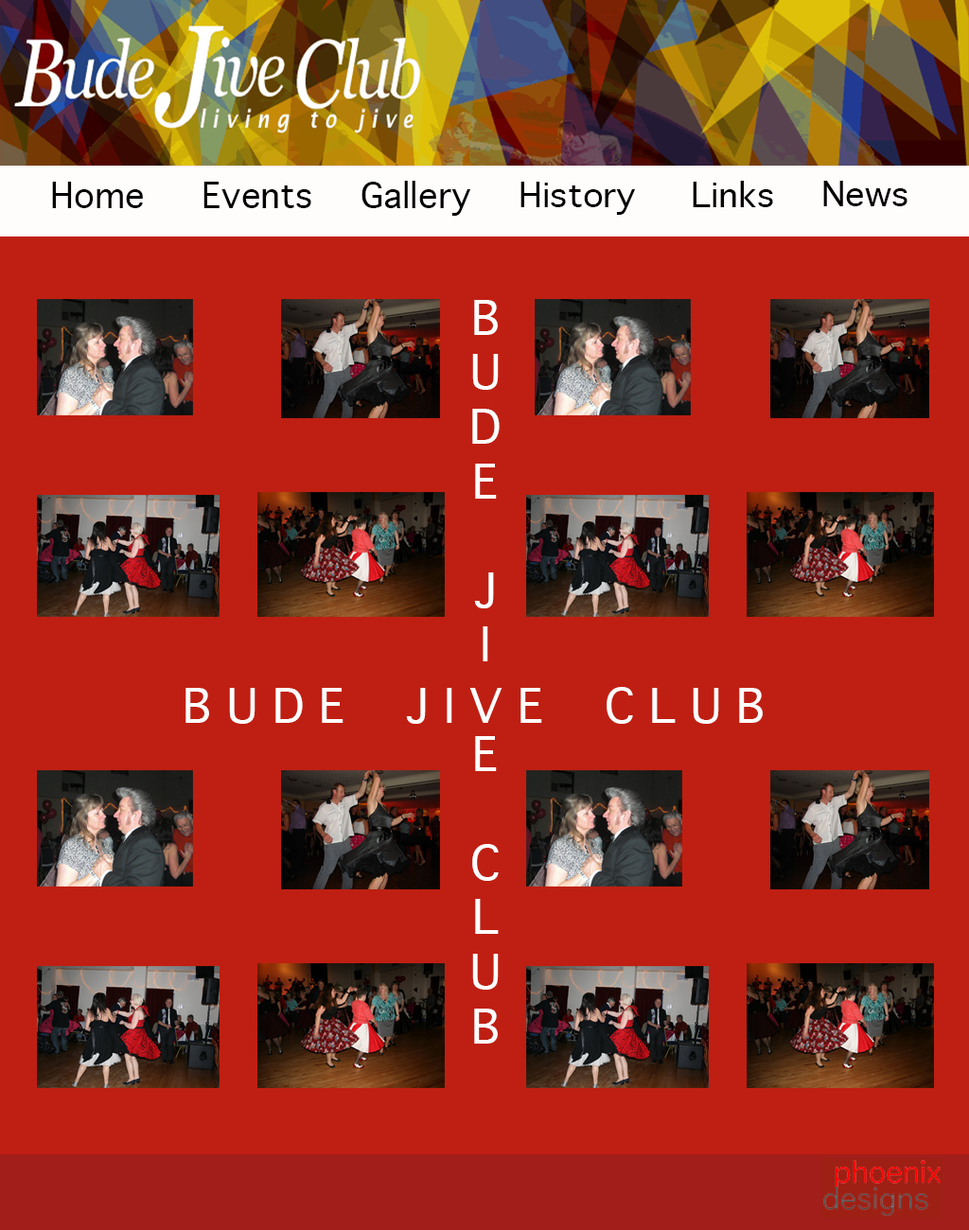
<style>
.page{position:relative;width:969px;height:1230px;background:#bf1f12}
.page>*{position:absolute;margin:0}
.t1{font:33.9px "Geneva";color:#020000}
.t2{font:32.8px "Geneva";color:#020000;scale:1.04 1}
.t3{font:45.4px "Geneva";color:#fdfdfd}
</style>
<div class="page">
<p class="t1" style="left:52px;top:182px;width:91px;height:26px">Home</p>
<p class="t1" style="left:203px;top:182px;width:108px;height:26px">Events</p>
<p class="t1" style="left:362px;top:181px;width:108px;height:35px">Gallery</p>
<p class="t2" style="left:521px;top:182px;width:114px;height:33px">History</p>
<p class="t2" style="left:693px;top:181px;width:80px;height:26px">Links</p>
<p class="t2" style="left:823px;top:181px;width:85px;height:25px">News</p>
<p class="t3" style="left:472px;top:300px;width:28px;height:744px;text-align:center">B<br>U<br>D<br>E<br><br>J<br>I<br><br>E<br><br>C<br>L<br>U<br>B</p>
<p class="t3" style="left:186px;top:687px;width:577px;height:37px">B U D E    J I V E    C L U B</p>
</div>
